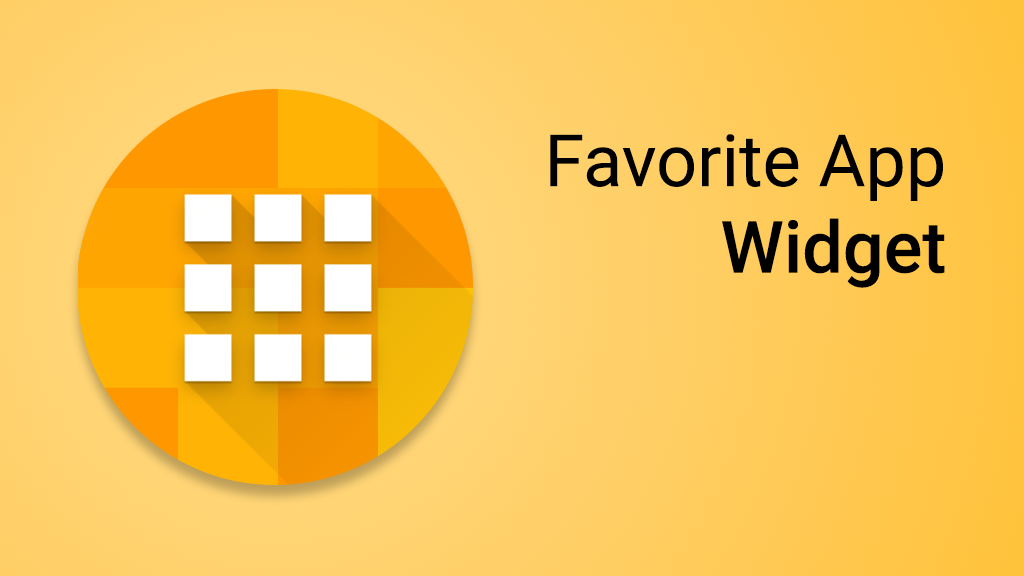
<style>
.page{position:relative;width:1024px;height:576px}
.page>*{position:absolute;margin:0}
.t1{font:72px "Roboto-Regular";color:#000000}
.t2{font:72px "Roboto-Medium";color:#000000}
</style>
<div class="page">
<p class="t1" style="left:550px;top:134px;width:395px;height:154px;text-align:right">Favorite App<br><span class="t2">Widget</span></p>
</div>
